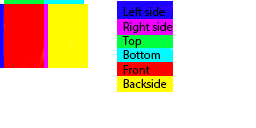
<style>
.page{position:relative;width:256px;height:128px;background:#ffffff}
.page>*{position:absolute;margin:0}
.t1{font:12px "MyriadPro-Regular";color:#000000}
</style>
<div class="page">
<p class="t1" style="left:122px;top:7px;width:51px;height:81px">Left side<br>Right side<br>Top<br>Bottom<br>Front<br>Backside</p>
</div>
